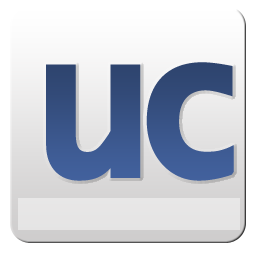
<style>
.page{position:relative;width:256px;height:256px}
.page>*{position:absolute;margin:0}
.t1{font:211px "LucidaGrandeBold";letter-spacing:-0.1em;color:#395488}
</style>
<div class="page">
<p class="t1" style="left:46px;top:62px;width:188px;height:119px">uc</p>
</div>
